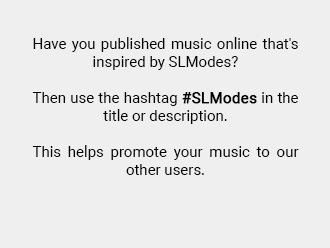
<style>
.page{position:relative;width:330px;height:248px;background:#efefef}
.page>*{position:absolute;margin:0}
.t1{font:15px "Roboto-Regular";color:#000000}
.t2{font:15px "Roboto-Regular";color:#000000;font-weight:bold}
</style>
<div class="page">
<p class="t1" style="left:32px;top:37px;width:267px;height:138px;text-align:justify">Have you published music online that's inspired by SLModes?<br><br>Then use the hashtag <span class="t2">#SLModes</span> in the title or description.<br><br>This helps promote your music to our other users.</p>
</div>
